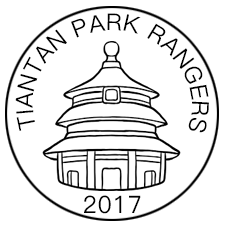
<style>
.page{position:relative;width:225px;height:225px;background:#ffffff}
.page>*{position:absolute;margin:0}
.t1{font:23.6px "PingFang-SC-Regular";letter-spacing:0.025em;color:#000000}
.t2{font:24px "PingFang-SC-Regular";letter-spacing:0.025em;color:#000000}
</style>
<div class="page">
<p class="t1" style="left:15px;top:13px;width:194px;height:120px;rotate:-116deg">TIANTAN PARK RANGERS</p>
<p class="t2" style="left:84px;top:195px;width:57px;height:19px">2017</p>
</div>
